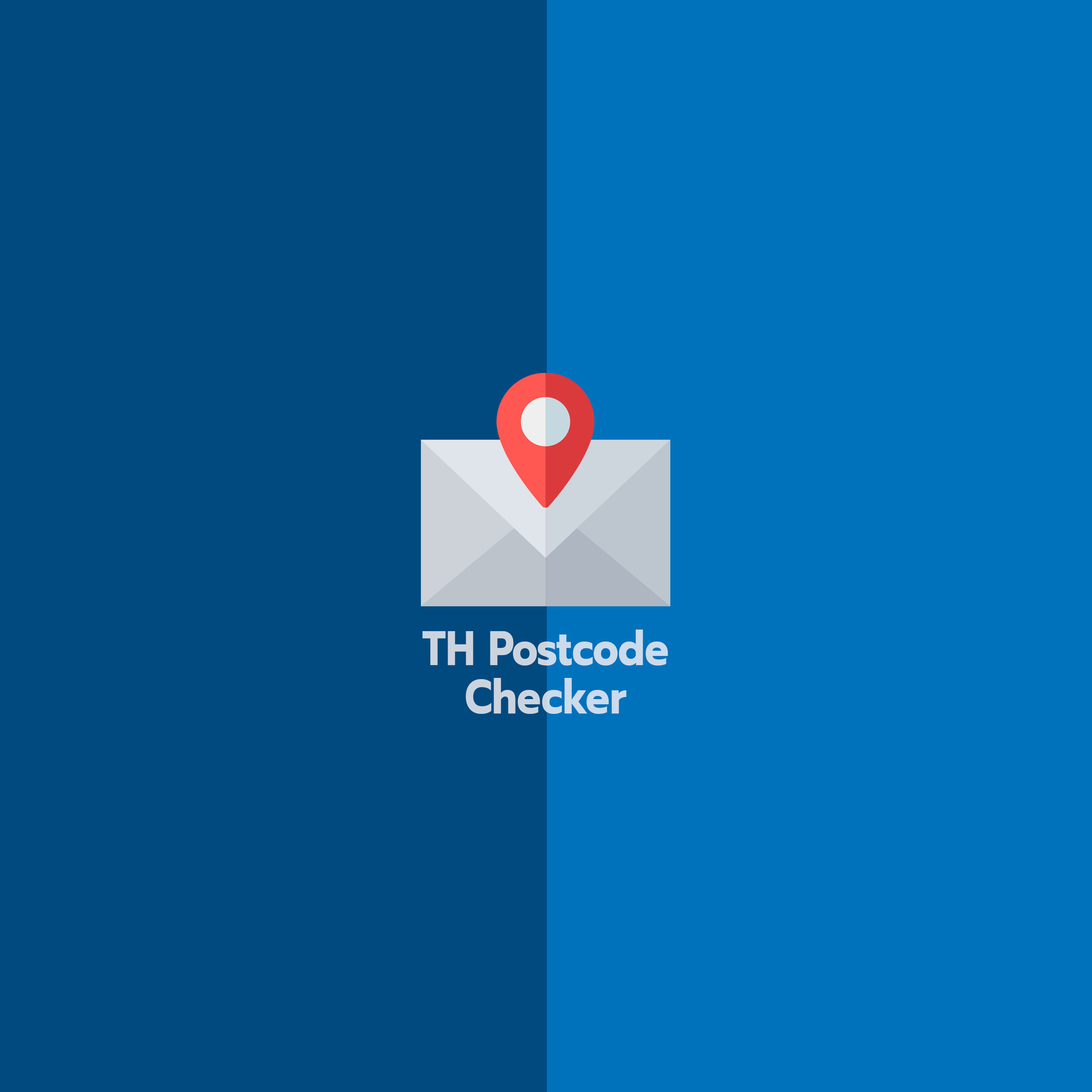
<style>
.page{position:relative;width:1092px;height:1092px;background:#0072bc}
.page>*{position:absolute;margin:0}
.t1{font:48.2px "Prompt-Bold";color:#cbd4de;scale:0.83 1}
</style>
<div class="page">
<p class="t1" style="left:422px;top:630px;width:246px;height:84px;text-align:center">TH Postcode Checker</p>
</div>
